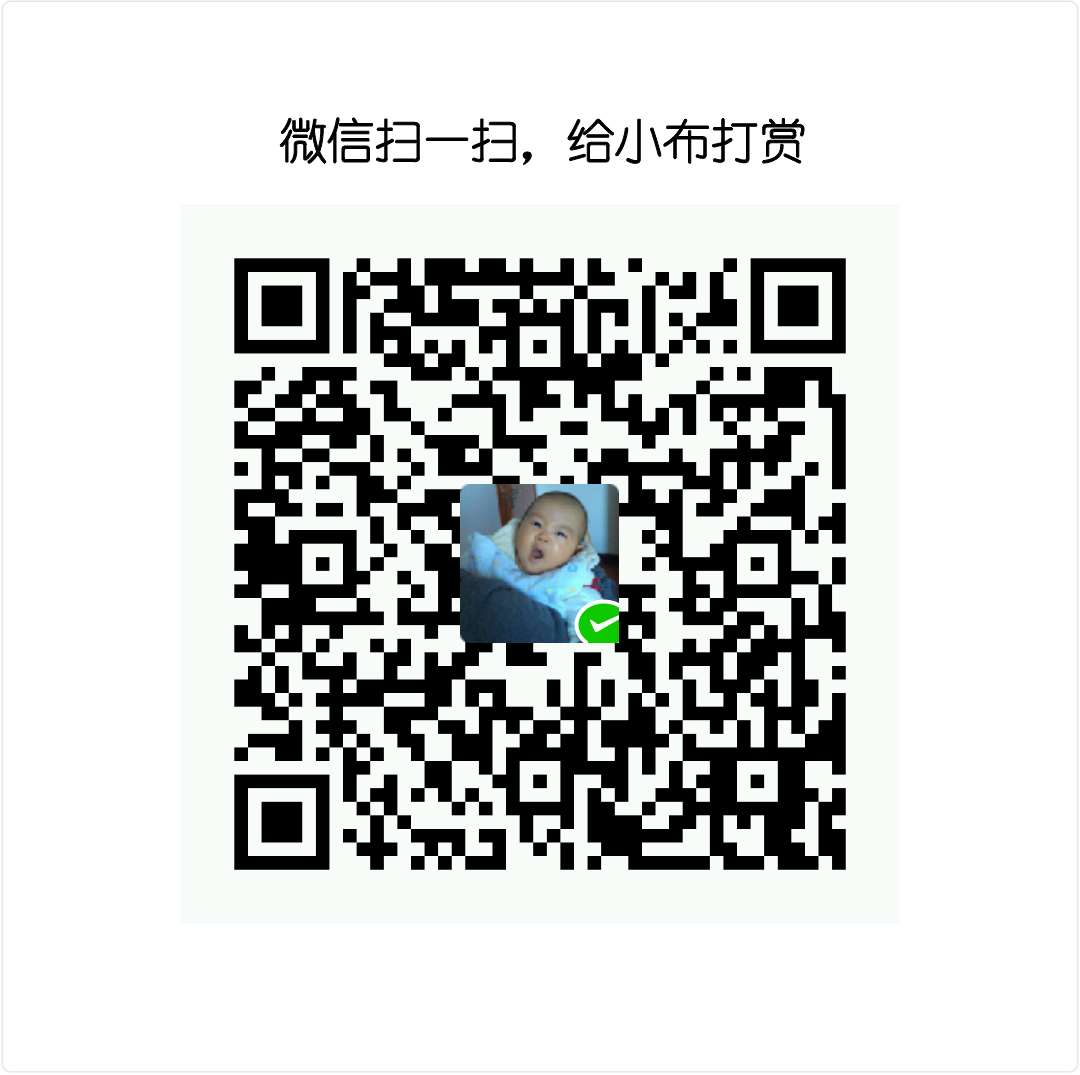
<style>
.page{position:relative;width:1080px;height:1075px;background:#ffffff}
.page>*{position:absolute;margin:0}
.t1{font:48px "YouYuan";color:#000000}
</style>
<div class="page">
<p class="t1" style="left:280px;top:117px;width:524px;height:48px">微信扫一扫，给小布打赏</p>
</div>
